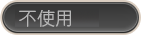
<style>
.page{position:relative;width:141px;height:36px}
.page>*{position:absolute;margin:0}
.t1{font:18px "GothicMB101Pr6N-Light";color:#b6b6b6}
</style>
<div class="page">
<p class="t1" style="left:19px;top:10px;width:52px;height:17px">不使用</p>
</div>
